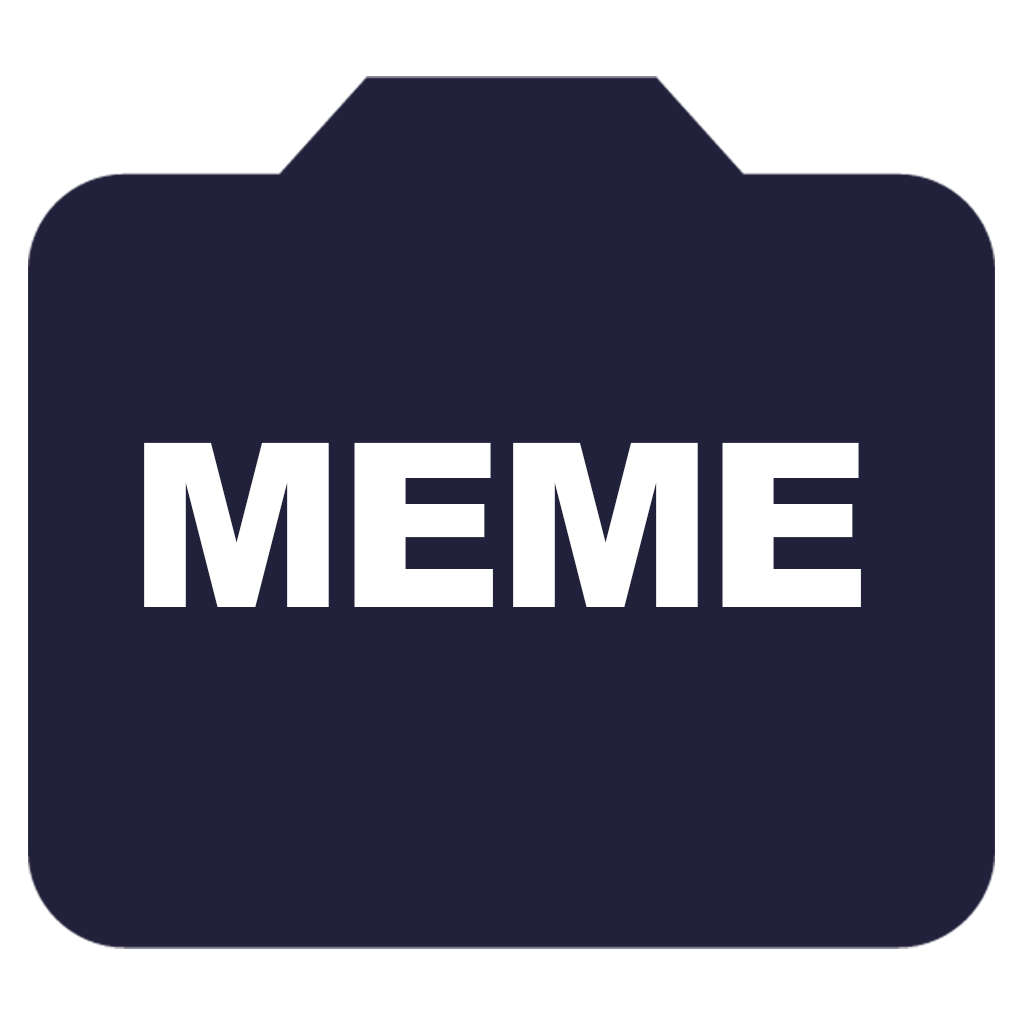
<style>
.page{position:relative;width:1024px;height:1024px;background:#22213b}
.page>*{position:absolute;margin:0}
.t1{font:229.3px "Arial-Black";letter-spacing:-0.03em;color:#ffffff}
</style>
<div class="page">
<p class="t1" style="left:144px;top:442px;width:717px;height:165px">MEME</p>
</div>
